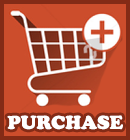
<style>
.page{position:relative;width:130px;height:140px;background:#cc4d2c}
.page>*{position:absolute;margin:0}
.t1{font:19.5px "CooperBlack";color:#ffffff}
</style>
<div class="page">
<p class="t1" style="left:7px;top:115px;width:116px;height:15px">PURCHASE</p>
</div>
